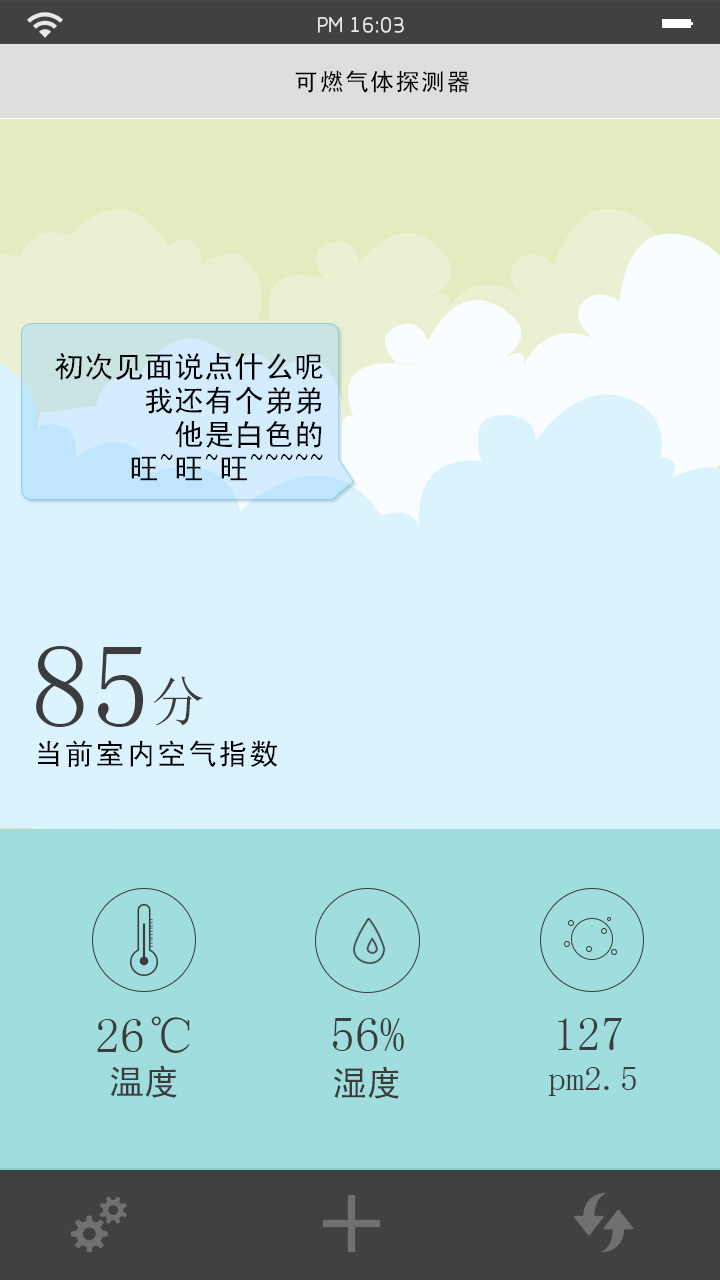
<style>
.page{position:relative;width:720px;height:1280px;background:#daf3ff}
.page>*{position:absolute;margin:0}
.t1{font:21.3px "RTWSYueGoTrial-Regular";color:#ebe7e6}
.t2{font:24px "SimHei";letter-spacing:0.06em;color:#000000}
.t3{font:30px/34px "SimHei";color:#000000}
.t4{font:119.2px "SimSun";color:#3c3c3c}
.t5{font:54.5px "SimSun";color:#3c3c3c}
.t6{font:29.1px "SimHei";letter-spacing:0.06em;color:#000000}
.t7{font:50px "SimSun";color:#3c3c3c}
.t8{font:47.7px "SimSun";color:#3c3c3c}
.t9{font:35px "SimHei";color:#3c3c3c}
.t10{font:35px "SimSun";color:#3c3c3c}
</style>
<div class="page">
<p class="t1" style="left:318px;top:17px;width:86px;height:16px">PM 16:03</p>
<p class="t2" style="left:295px;top:70px;width:174px;height:23px">可燃气体探测器</p>
<p class="t3" style="left:55px;top:353px;width:268px;height:128px;text-align:right">初次见面说点什么呢<br>我还有个弟弟<br>他是白色的<br>旺~旺~旺~~~~~</p>
<p class="t4" style="left:36px;top:646px;width:108px;height:81px">85</p>
<p class="t5" style="left:153px;top:676px;width:50px;height:50px">分</p>
<p class="t6" style="left:38px;top:740px;width:240px;height:27px">当前室内空气指数</p>
<p class="t7" style="left:97px;top:1016px;width:93px;height:37px">26℃</p>
<p class="t7" style="left:332px;top:1018px;width:72px;height:33px">56%</p>
<p class="t8" style="left:558px;top:1018px;width:64px;height:32px">127</p>
<p class="t9" style="left:110px;top:1065px;width:67px;height:33px">温度</p>
<p class="t9" style="left:334px;top:1066px;width:65px;height:33px">湿度</p>
<p class="t10" style="left:548px;top:1067px;width:88px;height:29px">pm2.5</p>
</div>
